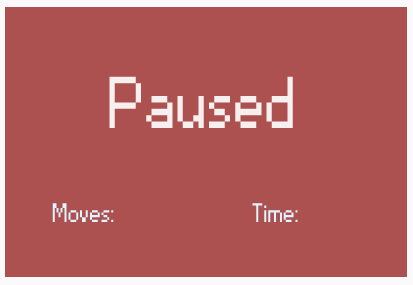
<style>
.page{position:relative;width:413px;height:285px;background:#ac5050}
.page>*{position:absolute;margin:0}
.t1{font:68.3px "Small Fonts";color:#f8efef}
.t2{font:25px "Small Fonts";color:#e0f5ff}
</style>
<div class="page">
<p class="t1" style="left:109px;top:76px;width:184px;height:52px">Paused</p>
<p class="t2" style="left:52px;top:203px;width:62px;height:19px">Moves:</p>
<p class="t2" style="left:252px;top:203px;width:46px;height:19px">Time:</p>
</div>
